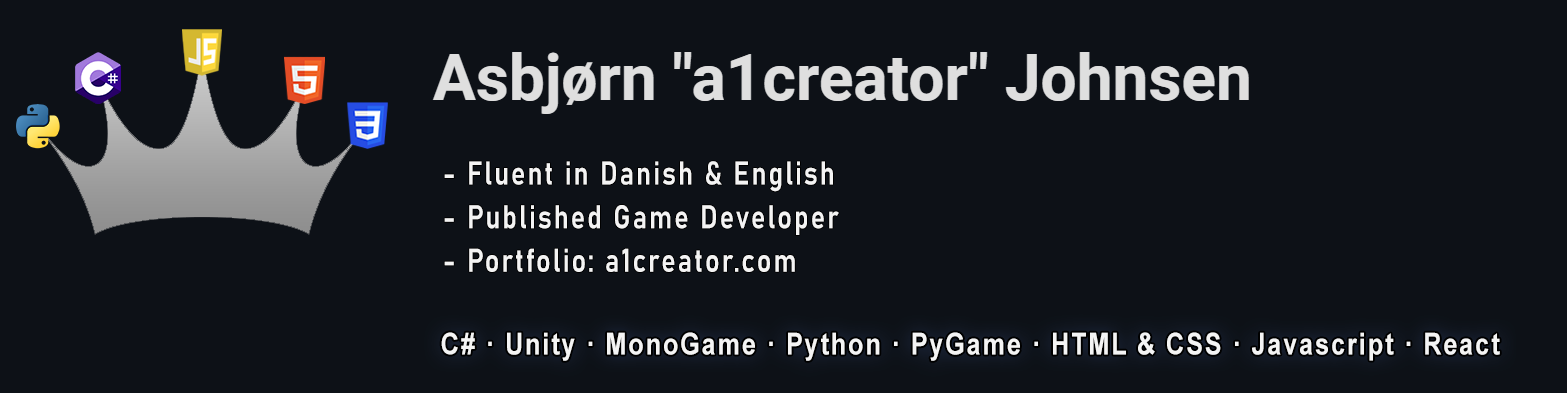
<style>
.page{position:relative;width:1567px;height:393px;background:#0d1117}
.page>*{position:absolute;margin:0}
.t1{font:32.4px/43.7px "Bahnschrift-SemiBold";letter-spacing:0.075em;color:#f4f4f4;scale:0.83 1}
.t2{font:30.2px "Arial-BoldMT";letter-spacing:0.075em;color:#f4f4f4;scale:0.83 1}
</style>
<div class="page">
<p class="t1" style="left:444px;top:161px;width:395px;height:111px">- Fluent in Danish &amp; English<br>- Published Game Developer<br>- Portfolio: a1creator.com</p>
<p class="t2" style="left:441px;top:332px;width:1059px;height:29px">C# · Unity · MonoGame · Python · PyGame · HTML &amp; CSS · Javascript · React</p>
</div>
